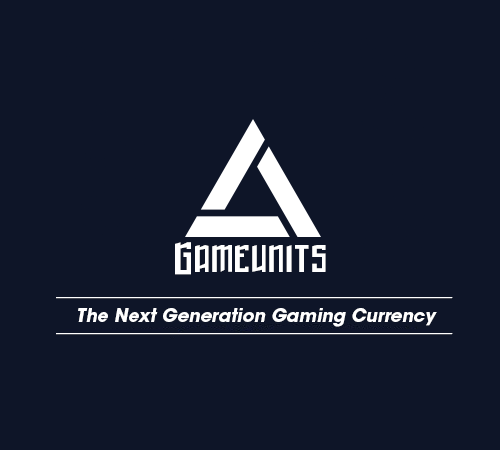
<style>
.page{position:relative;width:500px;height:450px;background:#0e1528}
.page>*{position:absolute;margin:0}
.t1{font:32px "Winter-in-Gotham-Regular";color:#ffffff}
.t2{font:18px "ITCAvantGardeStd-Bk";color:#ffffff}
.t3{font:18px "ITCAvantGardeStd-BoldObl";color:#ffffff}
</style>
<div class="page">
<p class="t1" style="left:175px;top:242px;width:151px;height:33px">Gameunits</p>
<p class="t2" style="left:56px;top:297px;width:397px;height:2px">____________________________________________</p>
<p class="t3" style="left:78px;top:308px;width:359px;height:19px">The Next Generation Gaming Currency</p>
<p class="t2" style="left:56px;top:333px;width:397px;height:2px">____________________________________________</p>
</div>
